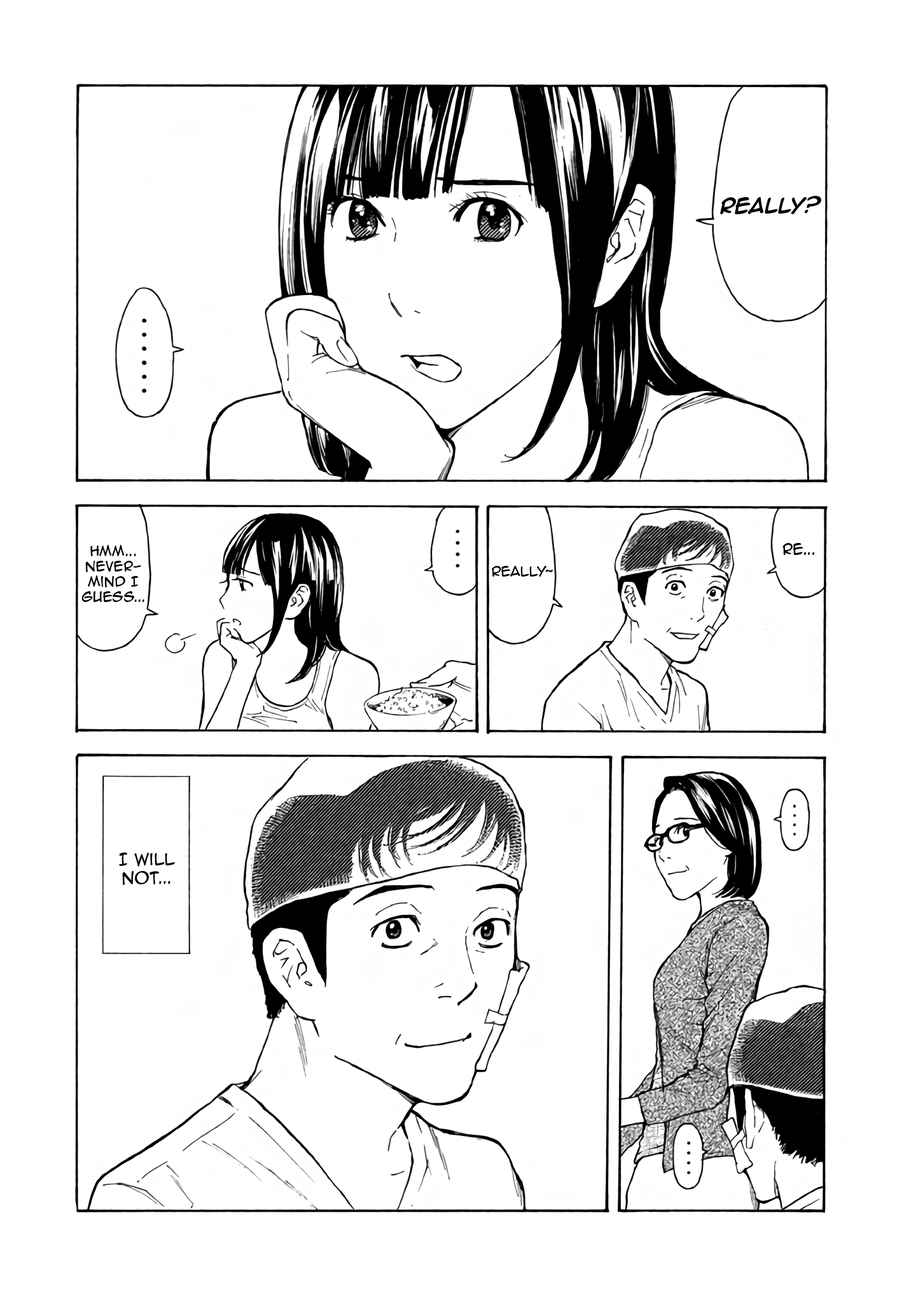
<style>
.page{position:relative;width:916px;height:1302px;background:#ffffff}
.page>*{position:absolute;margin:0}
.t1{font:17.8px "AnimeAce2.0BB-Bold";color:#000000}
.t2{font:12.7px "AnimeAce2.0BB";color:#000000}
.t3{font:14px "AnimeAce2.0BB";color:#000000}
.t4{font:15.3px "AnimeAce2.0BB";color:#000000}
</style>
<div class="page">
<p class="t1" style="left:720px;top:196px;width:101px;height:18px">Really?</p>
<p class="t2" style="left:81px;top:545px;width:63px;height:57px;text-align:center">Hmm... Never-<br>mind I guess...</p>
<p class="t3" style="left:782px;top:543px;width:33px;height:12px">Re...</p>
<p class="t2" style="left:492px;top:566px;width:61px;height:11px">Really~</p>
<p class="t4" style="left:119px;top:853px;width:56px;height:32px;text-align:center">I will Not...</p>
</div>
